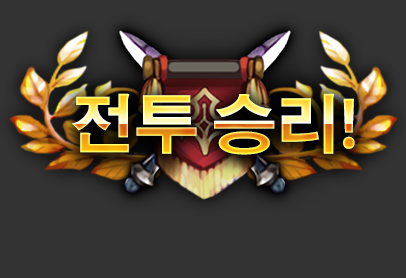
<style>
.page{position:relative;width:406px;height:278px;background:#333333}
.page>*{position:absolute;margin:0}
.t1{font:63.7px "AdobeGothicStd-Bold"}
</style>
<div class="page">
<p class="t1" style="left:72px;top:93px;width:283px;height:62px">전투 승리!</p>
</div>
